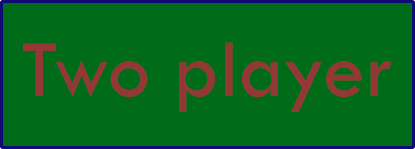
<style>
.page{position:relative;width:415px;height:149px;background:#006b19}
.page>*{position:absolute;margin:0}
.t1{font:84px "TwCenMT-Regular";color:#943737}
</style>
<div class="page">
<p class="t1" style="left:23px;top:42px;width:369px;height:70px">Two player</p>
</div>
